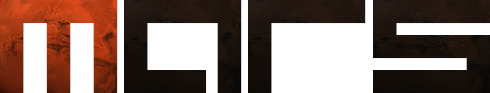
<style>
.page{position:relative;width:490px;height:93px;background:#ffffff}
.page>*{position:absolute;margin:0}
.t1{font:164px "Mecha";letter-spacing:-0.1em;color:#181818}
.t2{font:164px "Mecha";letter-spacing:-0.1em;color:#8b4422}
</style>
<div class="page">
<p class="t1" style="left:0px;top:0px;width:491px;height:93px"><span class="t2">M</span>ArS</p>
</div>
